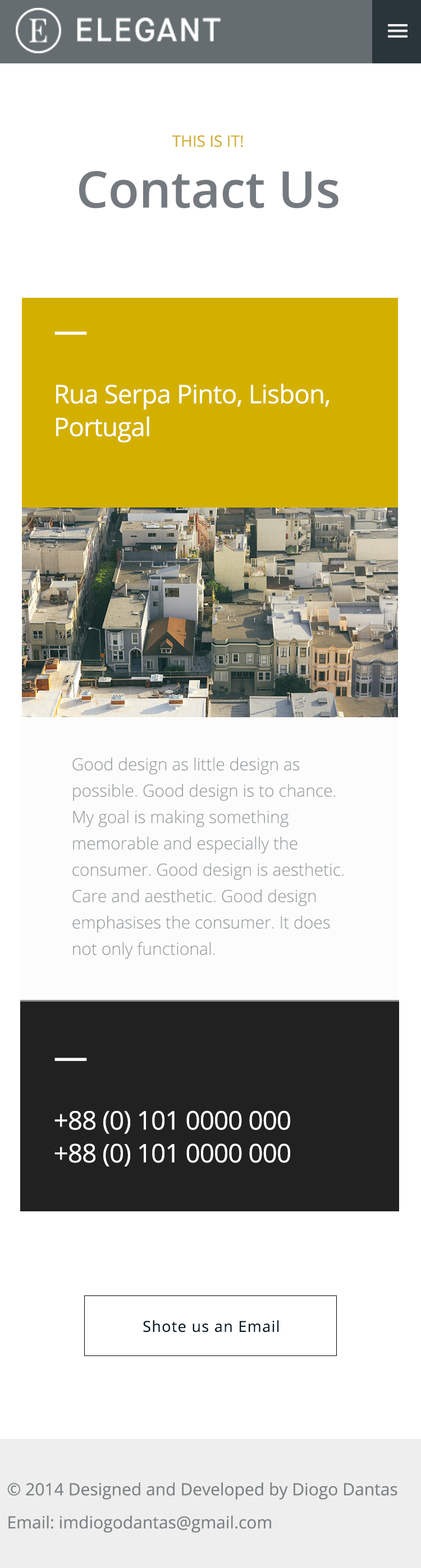
<style>
.page{position:relative;width:421px;height:1568px;background:#ffffff}
.page>*{position:absolute;margin:0}
.t1{font:15.7px "OpenSans";color:#d4af37;text-transform:uppercase}
.t2{font:50.5px "OpenSans-Semibold";color:#747a7f}
.t3{font:25.7px/32.8px "OpenSans";letter-spacing:-0.02em;color:#ffffff}
.t4{font:16.8px/26.4px "OpenSans-Light";color:#989ea1}
.t5{font:15.1px "OpenSans";letter-spacing:0.05em;color:#021725}
.t6{font:16.8px "OpenSans";color:#7c8184}
</style>
<div class="page">
<p class="t1" style="left:172px;top:135px;width:71px;height:12px">This is It!</p>
<p class="t2" style="left:79px;top:171px;width:259px;height:38px">Contact Us</p>
<p class="t3" style="left:56px;top:384px;width:273px;height:58px">Rua Serpa Pinto, Lisbon,<br>Portugal</p>
<p class="t4" style="left:72px;top:757px;width:271px;height:202px">Good design as little design as possible. Good design is to chance. My goal is making something memorable and especially the consumer. Good design is aesthetic. Care and aesthetic. Good design emphasises the consumer. It does not only functional.</p>
<p class="t3" style="left:54px;top:1110px;width:236px;height:56px">+88 (0) 101 0000 000 <br>+88 (0) 101 0000 000</p>
<p class="t5" style="left:143px;top:1320px;width:136px;height:12px">Shote us an Email</p>
<p class="t6" style="left:7px;top:1482px;width:390px;height:18px">© 2014 Designed and Developed by Diogo Dantas</p>
<p class="t6" style="left:8px;top:1515px;width:263px;height:18px">Email: imdiogodantas@gmail.com</p>
</div>
